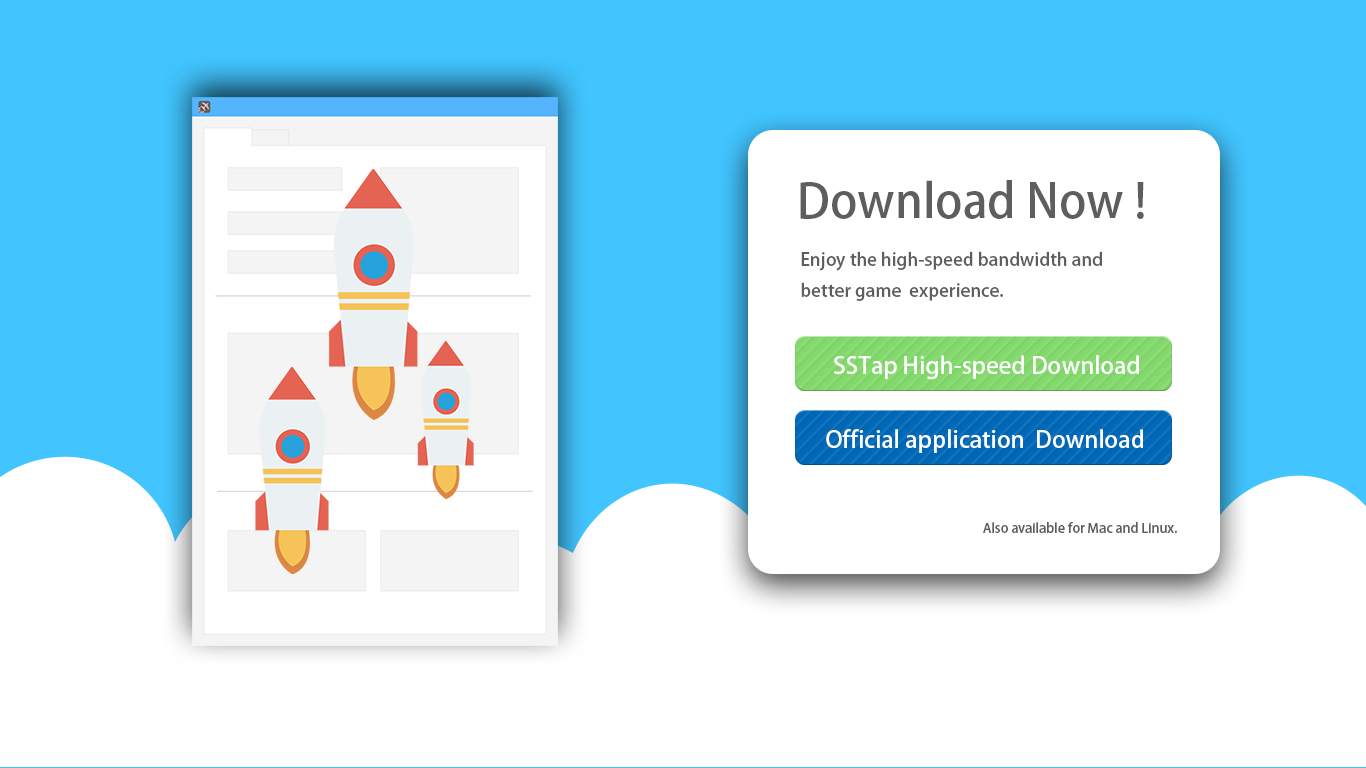
<style>
.page{position:relative;width:1366px;height:768px;background:#ffffff}
.page>*{position:absolute;margin:0}
.t1{font:46.6px "AdobeHeitiStd-Regular";color:#5e5e5e}
.t2{font:18px "AdobeHeitiStd-Regular";color:#5e5e5e}
.t3{font:23.4px "AdobeHeitiStd-Regular";color:#ffffff}
.t4{font:13.2px "AdobeHeitiStd-Regular";color:#5e5e5e}
</style>
<div class="page">
<p class="t1" style="left:800px;top:180px;width:344px;height:39px">Download Now !</p>
<p class="t2" style="left:801px;top:251px;width:301px;height:50px">Enjoy the high-speed bandwidth and better game  experience.</p>
<p class="t3" style="left:834px;top:355px;width:305px;height:25px">SSTap High-speed Download</p>
<p class="t3" style="left:826px;top:429px;width:317px;height:24px">Official application  Download</p>
<p class="t4" style="left:983px;top:521px;width:194px;height:12px">Also available for Mac and Linux.</p>
</div>
